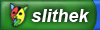
<style>
.page{position:relative;width:100px;height:30px}
.page>*{position:absolute;margin:0}
.t1{font:18px "Arial-BoldItalicMT";color:#ffffff}
</style>
<div class="page">
<p class="t1" style="left:31px;top:9px;width:59px;height:13px">slithek</p>
</div>
